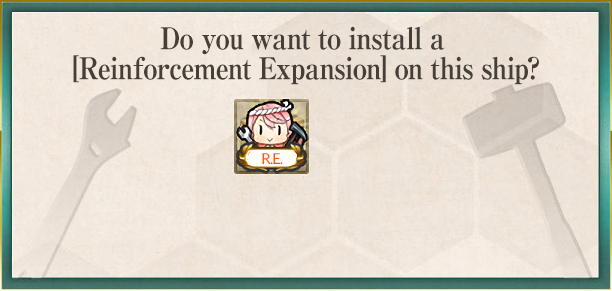
<style>
.page{position:relative;width:612px;height:291px}
.page>*{position:absolute;margin:0}
.t1{font:30px/30px "RyuminPro-ExBold";letter-spacing:-0.04em;color:#463f38;scale:0.9 1}
</style>
<div class="page">
<p class="t1" style="left:73px;top:26px;width:466px;height:59px;text-align:center">Do you want to install a <br>[Reinforcement Expansion] on this ship?</p>
</div>
